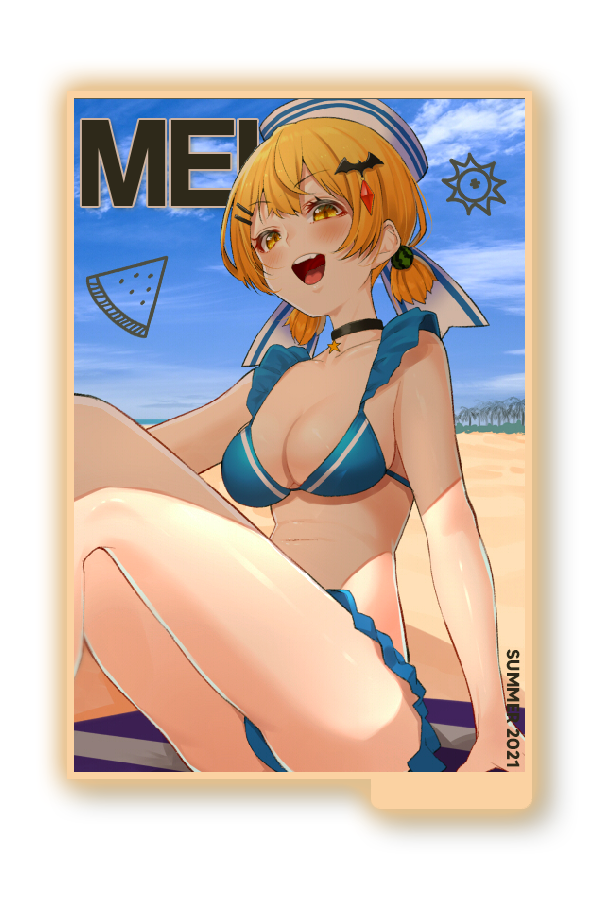
<style>
.page{position:relative;width:600px;height:900px;background:#ffffff}
.page>*{position:absolute;margin:0}
.t1{font:129.2px "CoolveticaRg-Regular";color:#2b2724}
.t2{font:17.4px "MADETOMMY-Bold";color:#2b2724}
</style>
<div class="page">
<p class="t1" style="left:81px;top:120px;width:219px;height:86px">MEL</p>
<p class="t2" style="left:506px;top:649px;width:14px;height:118px;rotate:90deg">SUMMER 2021</p>
</div>
